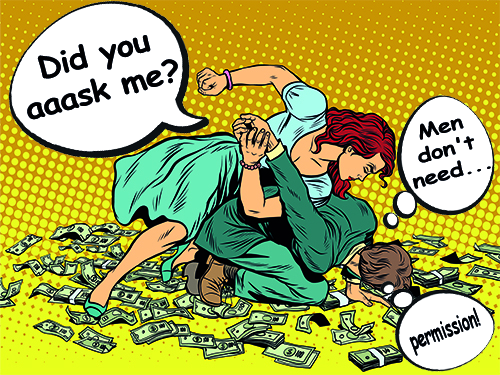
<style>
.page{position:relative;width:500px;height:375px}
.page>*{position:absolute;margin:0}
.t1{font:30.4px "ComicSansMS-Bold";letter-spacing:-0.02em;color:#010102;scale:1.08 1}
.t2{font:19.1px "ComicSansMS-Bold";letter-spacing:-0.02em;color:#010102;scale:1.27 1}
.t3{font:23.9px "ComicSansMS-Bold";letter-spacing:-0.02em;color:#010102;scale:0.61 1}
</style>
<div class="page">
<p class="t1" style="left:27px;top:35px;width:151px;height:85px;text-align:center;rotate:-15deg">Did you<br>aaask me?</p>
<p class="t2" style="left:412px;top:118px;width:79px;height:71px;text-align:center;rotate:-16deg">Men<br>don't<br>need...</p>
<p class="t3" style="left:409px;top:307px;width:72px;height:49px;rotate:-20deg">permission!</p>
</div>
